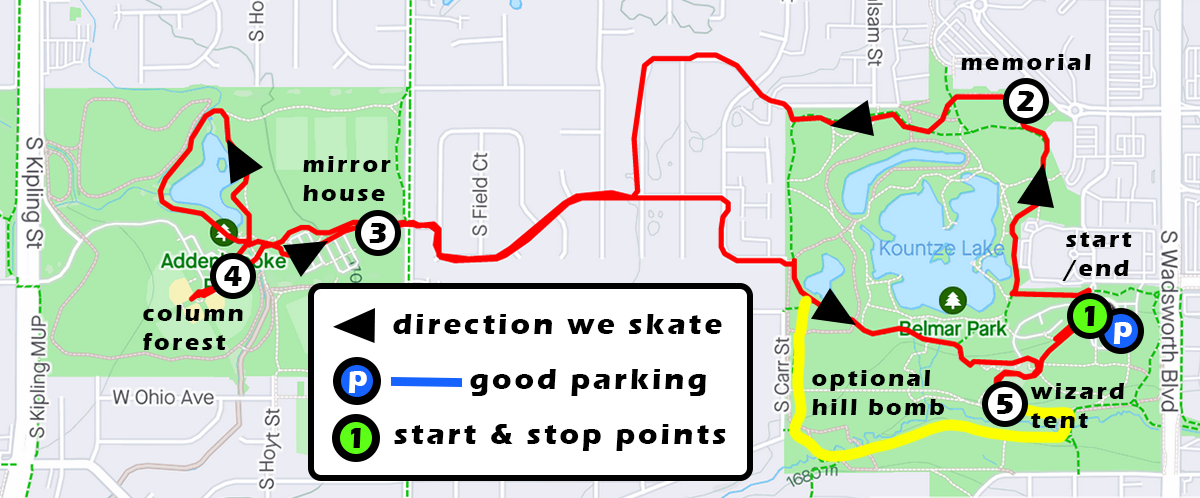
<style>
.page{position:relative;width:1200px;height:498px;background:#ececf4}
.page>*{position:absolute;margin:0}
.t1{font:24px "ErasITC-Bold";letter-spacing:0.1em;color:#000000}
.t2{font:30px "ErasITC-Bold";letter-spacing:0.1em;color:#000000}
.t3{font:30px "ErasITC-Bold";letter-spacing:0.1em;color:#ffffff}
</style>
<div class="page">
<p class="t1" style="left:961px;top:54px;width:130px;height:16px">memorial</p>
<p class="t2" style="left:1017px;top:91px;width:17px;height:20px">2</p>
<p class="t1" style="left:303px;top:156px;width:88px;height:45px">mirror<br>house</p>
<p class="t2" style="left:369px;top:223px;width:17px;height:20px">3</p>
<p class="t1" style="left:1062px;top:232px;width:70px;height:49px">start<br>/end</p>
<p class="t2" style="left:224px;top:266px;width:18px;height:20px">4</p>
<p class="t1" style="left:143px;top:305px;width:100px;height:45px">column<br>forest</p>
<p class="t2" style="left:393px;top:314px;width:329px;height:20px">direction we skate</p>
<p class="t2" style="left:1084px;top:306px;width:11px;height:20px">1</p>
<p class="t3" style="left:1113px;top:322px;width:19px;height:22px">p</p>
<p class="t3" style="left:348px;top:371px;width:19px;height:22px">p</p>
<p class="t2" style="left:470px;top:369px;width:236px;height:27px">good parking</p>
<p class="t1" style="left:812px;top:370px;width:132px;height:45px">optional<br>hill bomb</p>
<p class="t1" style="left:1030px;top:383px;width:94px;height:45px">wizard<br>tent</p>
<p class="t2" style="left:997px;top:394px;width:16px;height:20px">5</p>
<p class="t2" style="left:394px;top:424px;width:332px;height:27px">start &amp; stop points</p>
<p class="t2" style="left:350px;top:428px;width:11px;height:20px">1</p>
</div>
